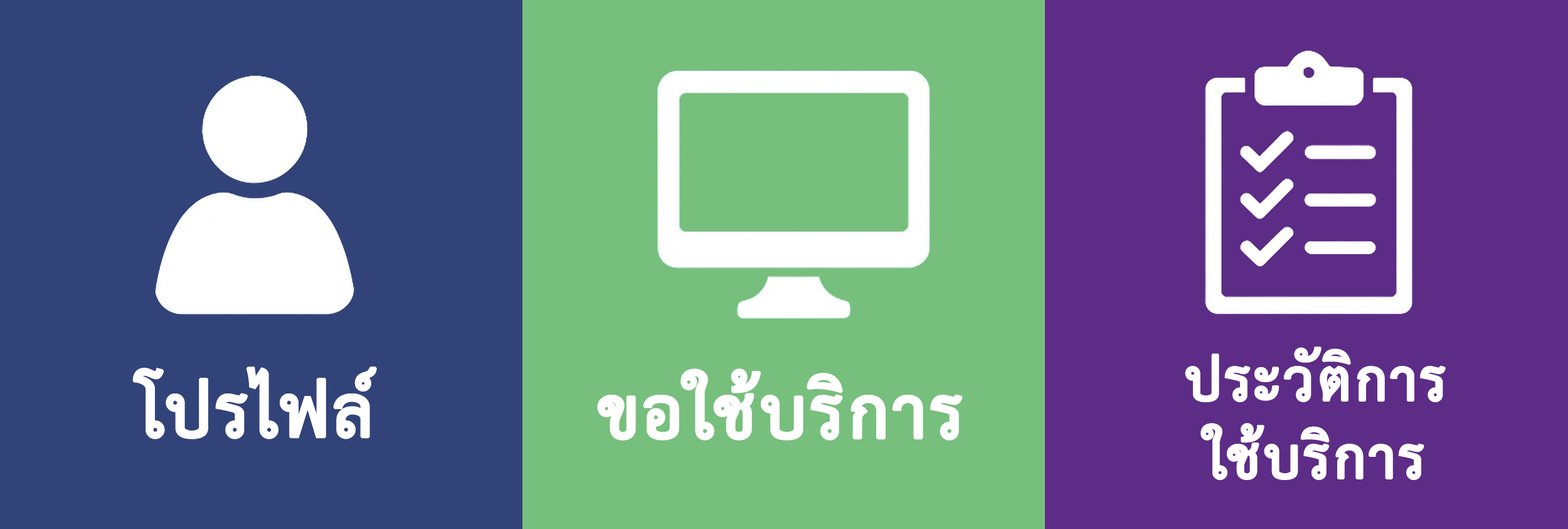
<style>
.page{position:relative;width:1568px;height:529px;background:#324379}
.page>*{position:absolute;margin:0}
.t1{font:81.5px "THSarabunPSK-Bold";color:#ffffff;font-weight:bold}
.t2{font:102.9px "THSarabunPSK-Bold";color:#ffffff;font-weight:bold}
</style>
<div class="page">
<p class="t1" style="left:1185px;top:346px;width:261px;height:56px">ประวัติการ</p>
<p class="t2" style="left:132px;top:366px;width:245px;height:73px">โปรไฟล์</p>
<p class="t2" style="left:597px;top:368px;width:366px;height:72px">ขอใช้บริการ</p>
<p class="t1" style="left:1200px;top:423px;width:224px;height:57px">ใช้บริการ</p>
</div>
